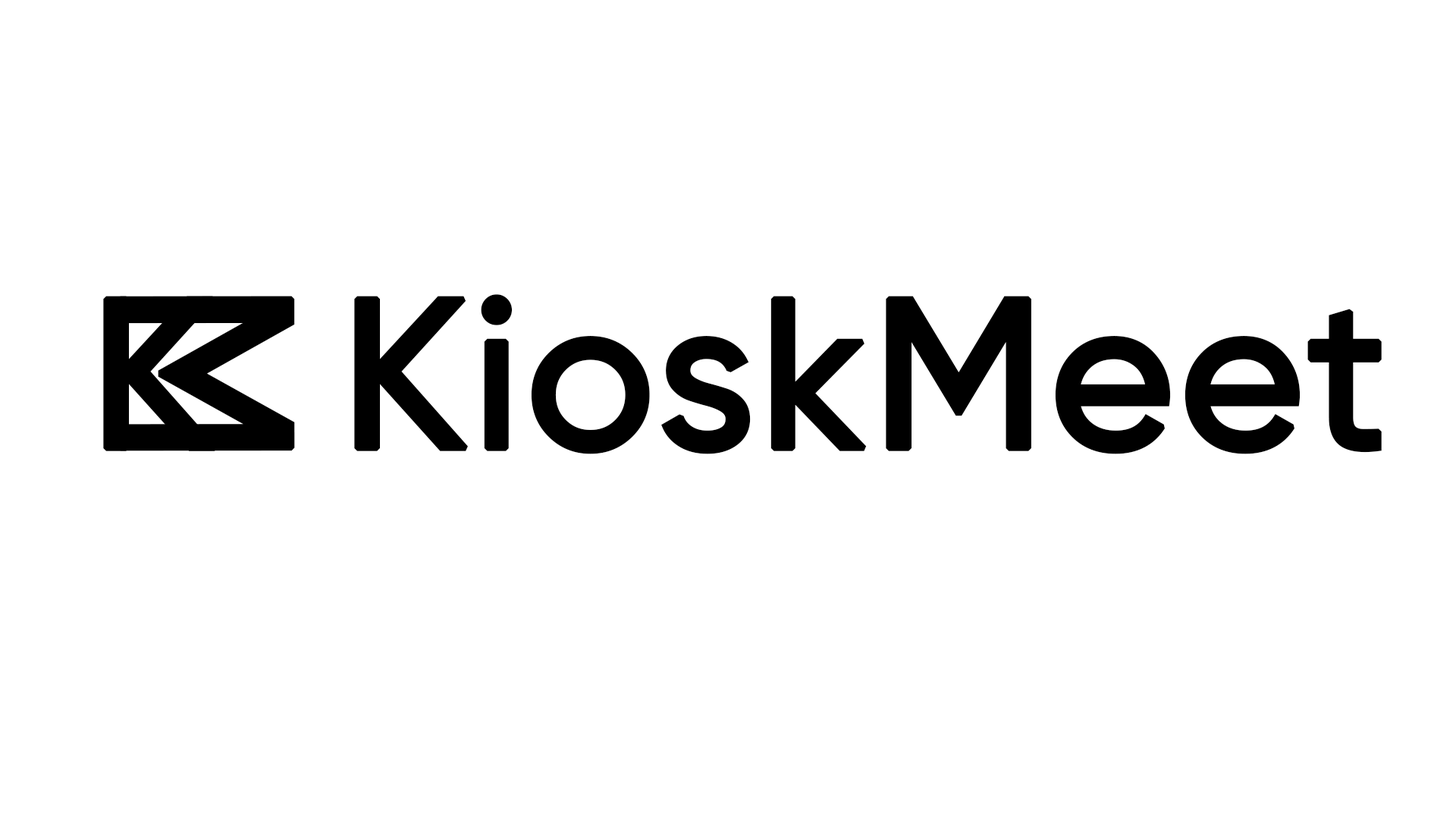
<style>
.page{position:relative;width:1456px;height:819px;background:#ffffff}
.page>*{position:absolute;margin:0}
.t1{font:212.7px "Gilroy-Medium";color:#000000;font-weight:bold}
.t2{font:244.3px "Gilroy-Medium";color:#000000;font-weight:bold;scale:0.93 1}
.t3{font:213.1px "Gilroy-Medium";color:#000000;font-weight:bold}
</style>
<div class="page">
<p class="t1" style="left:103px;top:296px;width:114px;height:155px">K</p>
<p class="t2" style="left:117px;top:296px;width:178px;height:155px;rotate:90deg">M</p>
<p class="t3" style="left:354px;top:294px;width:1028px;height:160px">KioskMeet</p>
</div>
